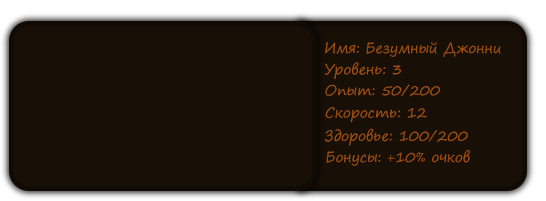
<style>
.page{position:relative;width:546px;height:201px;background:#180f07}
.page>*{position:absolute;margin:0}
.t1{font:14px "SegoePrint";color:#9f5011}
</style>
<div class="page">
<p class="t1" style="left:325px;top:42px;width:176px;height:15px">Имя: Безумный Джонни</p>
<p class="t1" style="left:324px;top:62px;width:77px;height:17px">Уровень: 3</p>
<p class="t1" style="left:325px;top:84px;width:115px;height:13px">Опыт: 50/200</p>
<p class="t1" style="left:325px;top:107px;width:102px;height:16px">Скорость: 12</p>
<p class="t1" style="left:325px;top:128px;width:143px;height:18px">Здоровье: 100/200</p>
<p class="t1" style="left:326px;top:150px;width:144px;height:16px">Бонусы: +10% очков</p>
</div>
